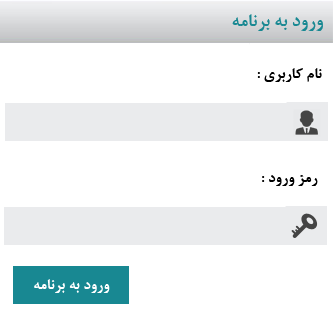
<style>
.page{position:relative;width:333px;height:321px;background:#ffffff}
.page>*{position:absolute;margin:0}
.t1{font:20px "BNazaninBold";color:#188892}
.t2{font:16.7px "BNazaninBold";color:#000000}
</style>
<div class="page">
<p class="t1" style="left:232px;top:14px;width:91px;height:17px">ورود به برنامه</p>
<p class="t2" style="left:257px;top:68px;width:65px;height:14px">نام کاربری :</p>
<p class="t2" style="left:262px;top:175px;width:56px;height:11px">رمز ورود :</p>
</div>
